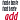
<style>
.page{position:relative;width:20px;height:20px;background:#ffffff}
.page>*{position:absolute;margin:0}
.t1{font:6.5px "MyriadPro-CondIt";color:#4d5157;scale:0.77 1}
.t2{font:11.2px "MyriadPro-CondIt";color:#cd062b}
</style>
<div class="page">
<p class="t1" style="left:2px;top:0px;width:17px;height:11px">texte texte<br>text texte</p>
<p class="t2" style="left:5px;top:12px;width:14px;height:8px">add</p>
</div>
